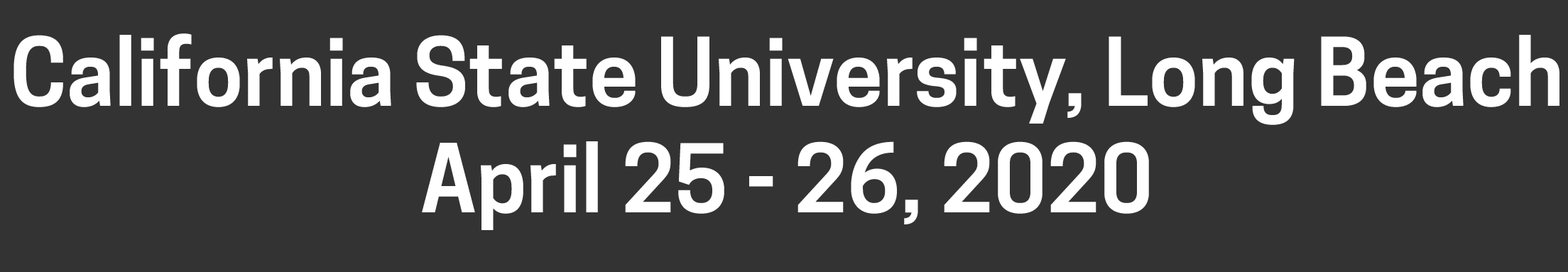
<style>
.page{position:relative;width:1568px;height:272px;background:#333333}
.page>*{position:absolute;margin:0}
.t1{font:88.8px "CooperHewitt-Semibold";color:#ffffff}
</style>
<div class="page">
<p class="t1" style="left:13px;top:33px;width:1546px;height:197px;text-align:center">California State University, Long Beach<br>April 25 - 26, 2020</p>
</div>
